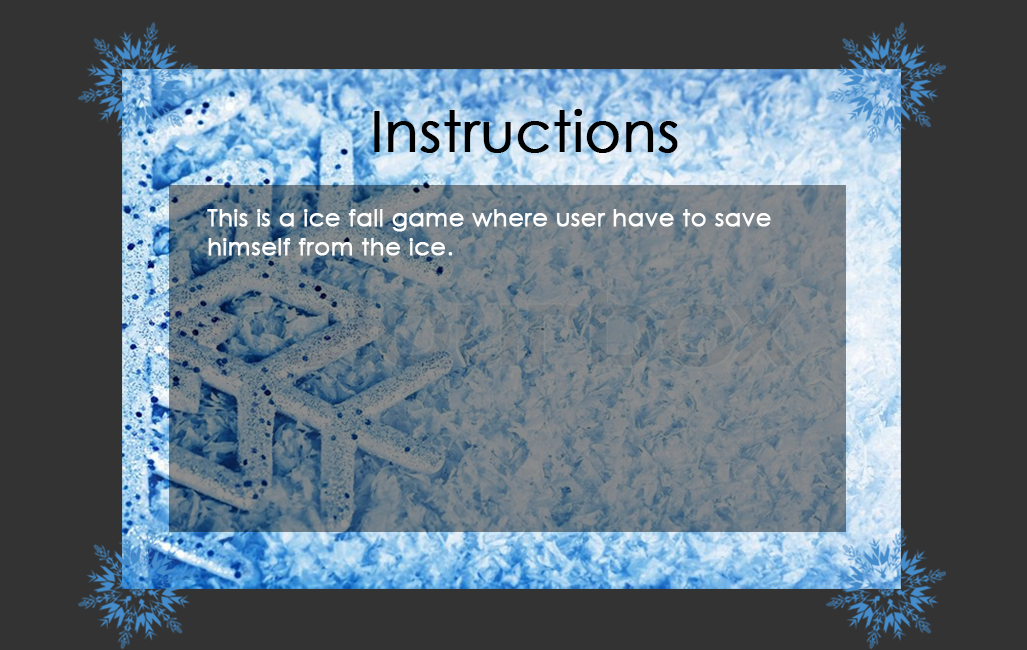
<style>
.page{position:relative;width:1027px;height:650px;background:#333333}
.page>*{position:absolute;margin:0}
.t1{font:55px "CenturyGothic";color:#000000;font-weight:bold}
.t2{font:24px "CenturyGothic";color:#ffffff;font-weight:bold}
</style>
<div class="page">
<p class="t1" style="left:374px;top:109px;width:304px;height:44px">Instructions</p>
<p class="t2" style="left:207px;top:209px;width:564px;height:47px">This is a ice fall game where user have to save <br>himself from the ice.</p>
</div>
